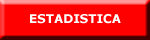
<style>
.page{position:relative;width:150px;height:40px;background:#ff0000}
.page>*{position:absolute;margin:0}
.t1{font:12px "Verdana-Bold";color:#ffffff}
</style>
<div class="page">
<p class="t1" style="left:30px;top:14px;width:91px;height:10px">ESTADISTICA</p>
</div>
